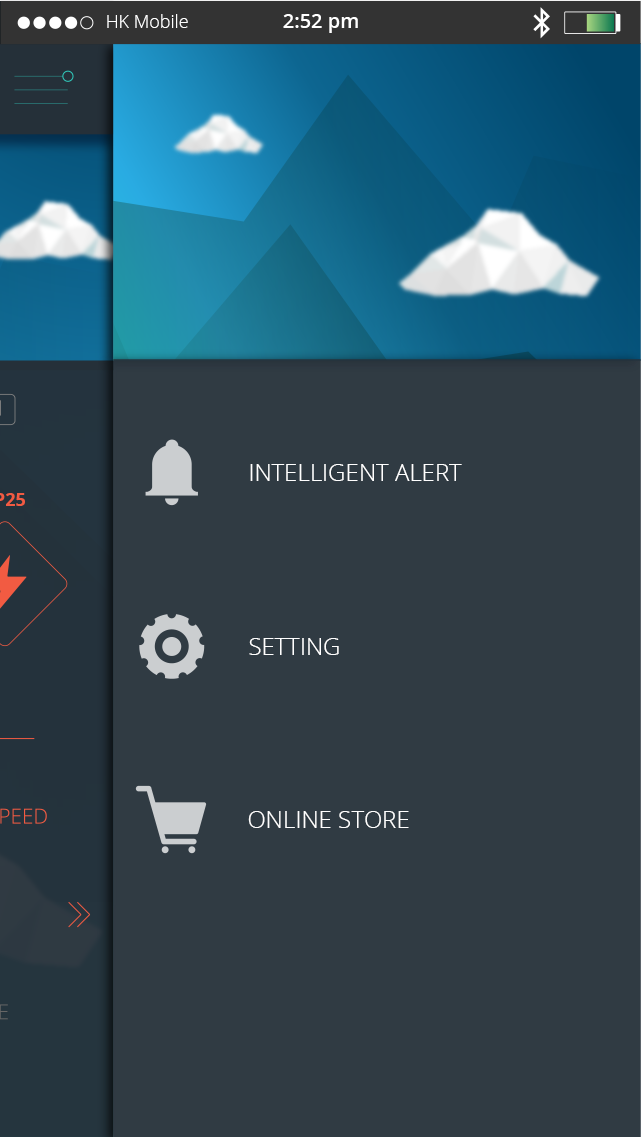
<style>
.page{position:relative;width:641px;height:1137px;background:#303b43}
.page>*{position:absolute;margin:0}
.t1{font:18px "OpenSans-Light";color:#ffffff}
.t2{font:20px "OpenSans-Semibold";color:#ffffff}
.t3{font:24px "OpenSans-Light";color:#ffffff}
</style>
<div class="page">
<p class="t1" style="left:107px;top:14px;width:81px;height:14px">HK Mobile</p>
<p class="t2" style="left:283px;top:14px;width:75px;height:19px">2:52 pm</p>
<p class="t3" style="left:250px;top:464px;width:212px;height:17px">INTELLIGENT ALERT</p>
<p class="t3" style="left:249px;top:638px;width:90px;height:17px">SETTING</p>
<p class="t3" style="left:248px;top:811px;width:161px;height:17px">ONLINE STORE</p>
</div>
